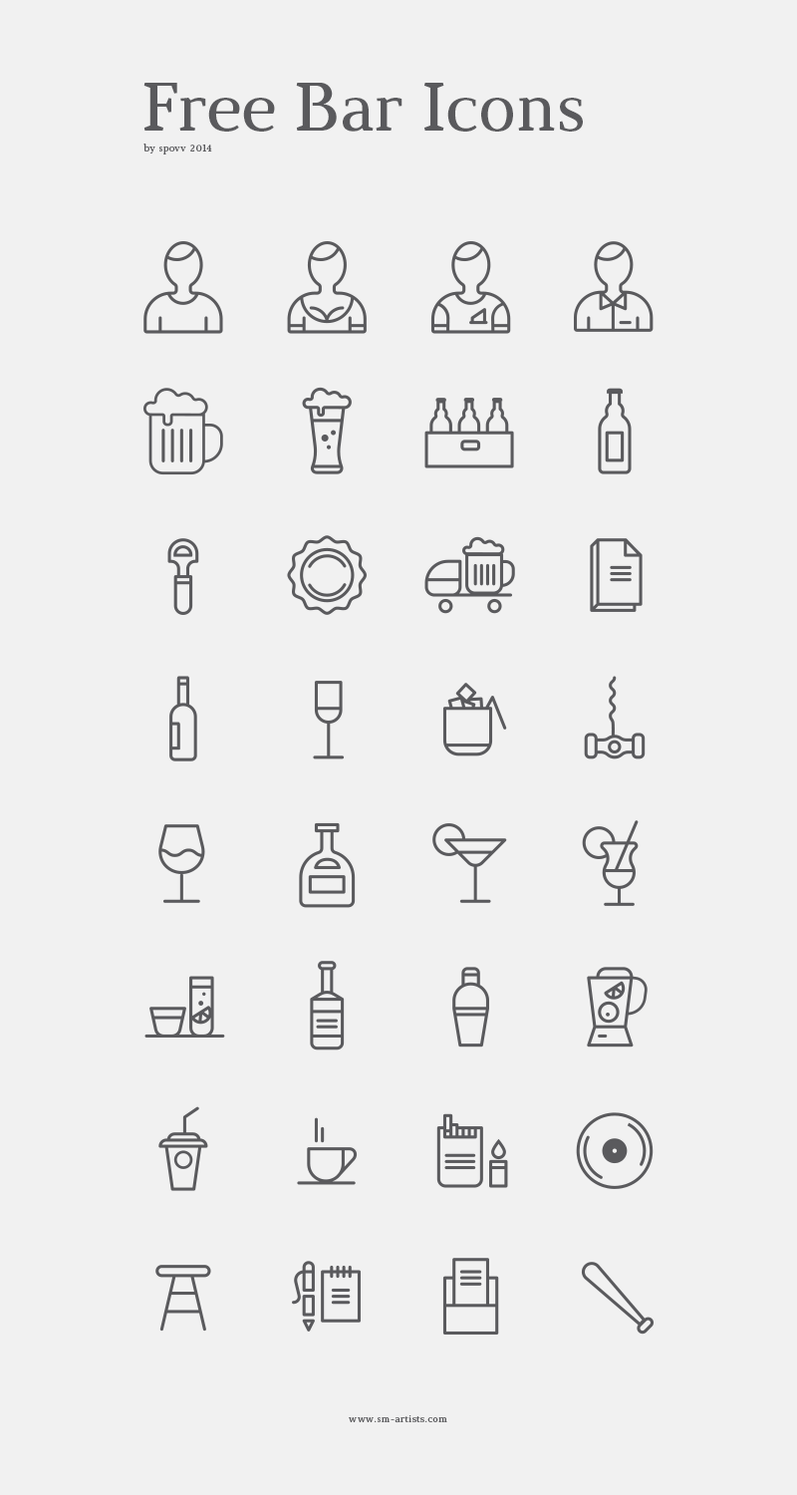
<style>
.page{position:relative;width:797px;height:1495px;background:#f1f1f1}
.page>*{position:absolute;margin:0}
.t1{font:68.8px "Marta";color:#5a5a5d}
.t2{font:10px "Marta";letter-spacing:0.045em;color:#5a5a5d}
</style>
<div class="page">
<p class="t1" style="left:144px;top:83px;width:439px;height:49px">Free Bar Icons</p>
<p class="t2" style="left:144px;top:144px;width:68px;height:11px">by spovv 2014</p>
<p class="t2" style="left:349px;top:1416px;width:99px;height:7px">www.sm-artists.com</p>
</div>
